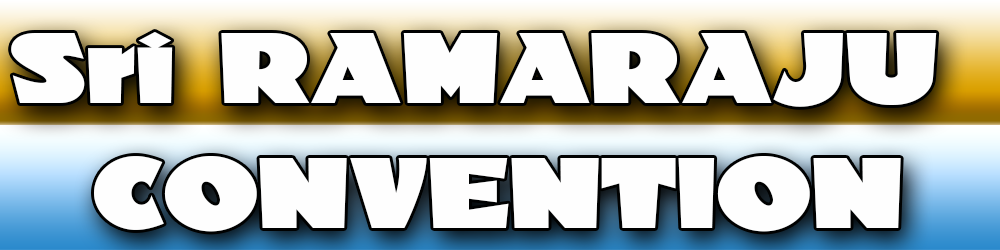
<style>
.page{position:relative;width:1000px;height:250px;background:#fefefe}
.page>*{position:absolute;margin:0}
.t1{font:101.4px "MaterhornNF";color:#fefefe;scale:1.5 1}
</style>
<div class="page">
<p class="t1" style="left:11px;top:32px;width:926px;height:200px;text-align:center">Sri RAMARAJU <br>CONVENTION</p>
</div>
